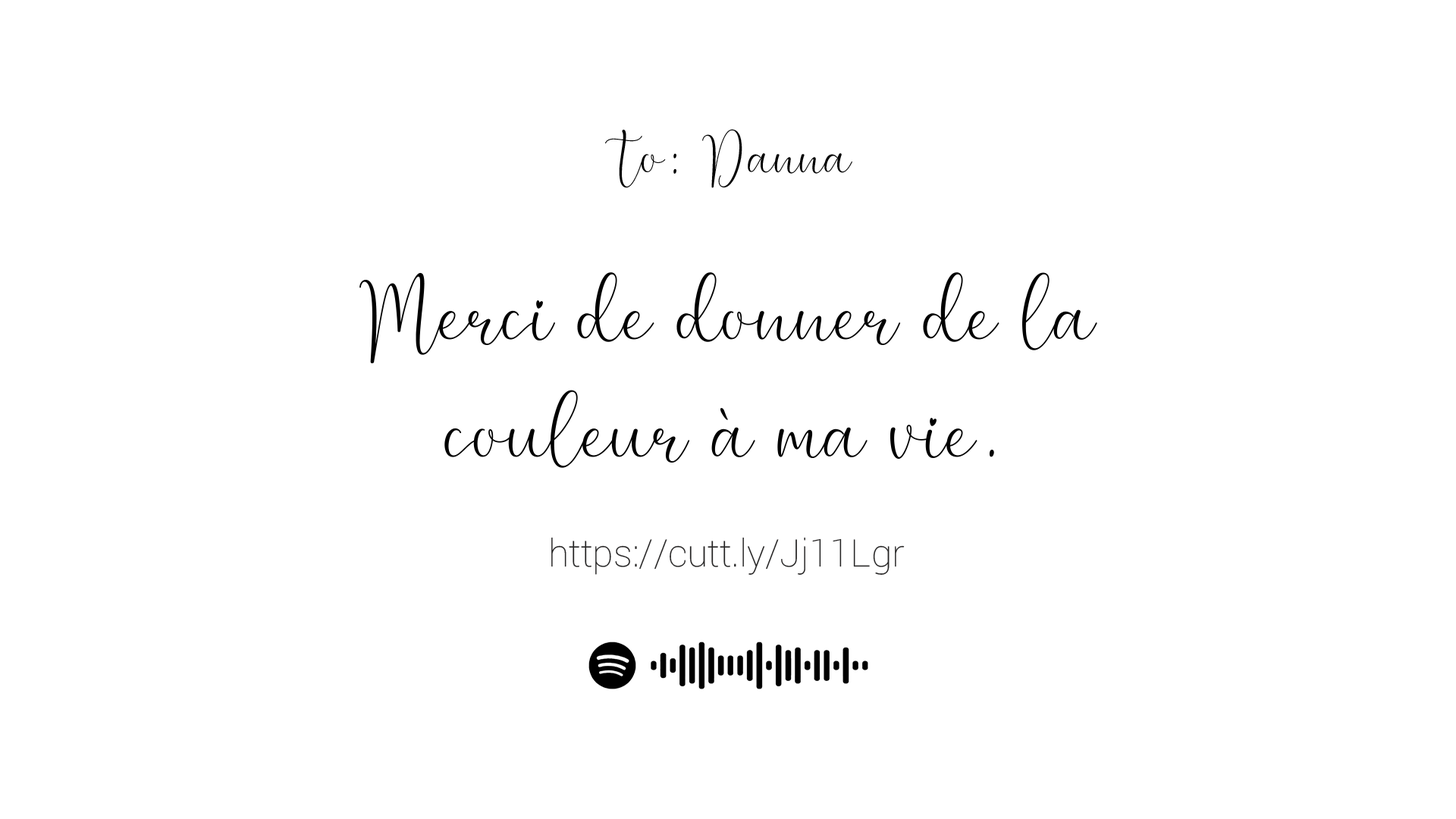
<style>
.page{position:relative;width:1456px;height:819px;background:#ffffff}
.page>*{position:absolute;margin:0}
.t1{font:63.2px "Lovelyfontdemo";color:#000000}
.t2{font:98px "Lovelyfontdemo";color:#000000}
.t3{font:37.9px "Roboto-Thin";color:#242323}
</style>
<div class="page">
<p class="t1" style="left:605px;top:129px;width:247px;height:59px">To: Danna</p>
<p class="t2" style="left:359px;top:272px;width:738px;height:196px;text-align:center">Merci de donner de la<br>couleur à ma vie.</p>
<p class="t3" style="left:551px;top:537px;width:354px;height:38px">https://cutt.ly/Jj11Lgr</p>
</div>
